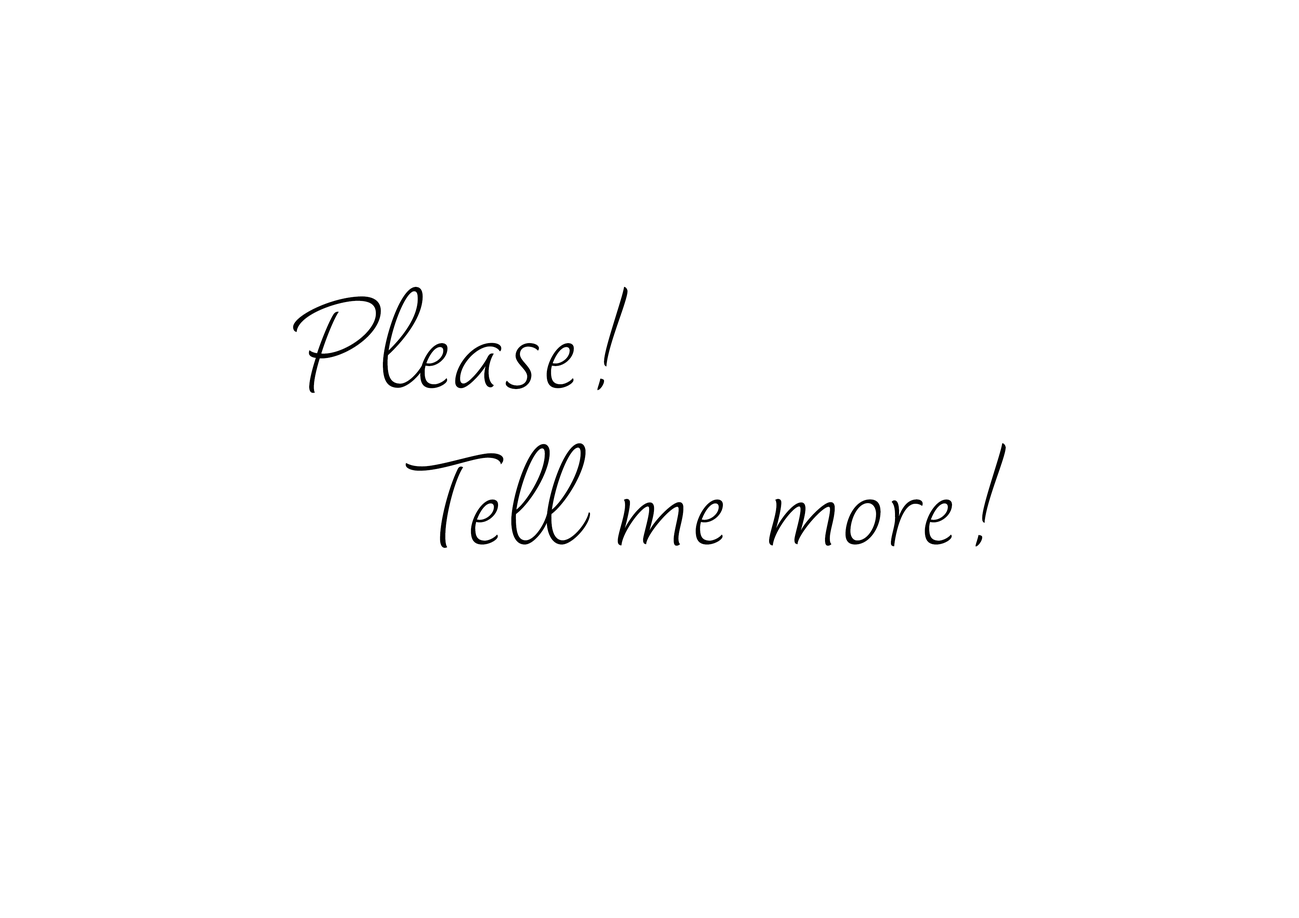
<style>
.page{position:relative;width:1299px;height:918px;background:#ffffff}
.page>*{position:absolute;margin:0}
.t1{font:154.3px/26.1px "Dolce-Thin";color:#000000}
</style>
<div class="page">
<p class="t1" style="left:293px;top:287px;width:713px;height:261px">Please!<br><br><br><br><br><br>   Tell me more!</p>
</div>
